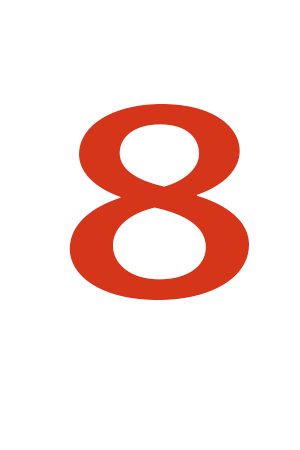
<style>
.page{position:relative;width:300px;height:450px;background:#ffffff}
.page>*{position:absolute;margin:0}
.t1{font:252px "AdobeFanHeitiStd-Bold";color:#d53518;scale:1.47 1}
</style>
<div class="page">
<p class="t1" style="left:69px;top:103px;width:180px;height:198px">8</p>
</div>
